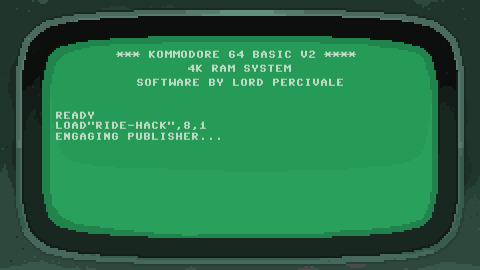
<style>
.page{position:relative;width:480px;height:270px;background:#269a57}
.page>*{position:absolute;margin:0}
.t1{font:8px "Kommondore";color:#bddac7}
</style>
<div class="page">
<p class="t1" style="left:116px;top:50px;width:240px;height:8px">*** KOMMODORE 64 BASIC V2 ****</p>
<p class="t1" style="left:188px;top:64px;width:103px;height:8px">4K RAM SYSTEM</p>
<p class="t1" style="left:137px;top:78px;width:206px;height:8px">SOFTWARE BY LORD PERCIVALE</p>
<p class="t1" style="left:56px;top:111px;width:38px;height:8px">READY</p>
<p class="t1" style="left:56px;top:121px;width:150px;height:9px">LOAD”RIDE-HACK”,8,1</p>
<p class="t1" style="left:56px;top:132px;width:164px;height:8px">ENGAGING PUBLISHER...</p>
</div>
